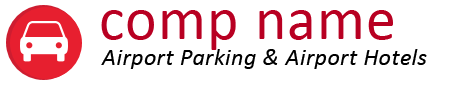
<style>
.page{position:relative;width:450px;height:86px;background:#ffffff}
.page>*{position:absolute;margin:0}
.t1{font:60px "Calibri";letter-spacing:0.02em;color:#b80022}
.t2{font:24px "Calibri-Italic";letter-spacing:0.02em;color:#000000}
</style>
<div class="page">
<p class="t1" style="left:101px;top:10px;width:292px;height:40px">comp name</p>
<p class="t2" style="left:101px;top:49px;width:326px;height:20px">Airport Parking &amp; Airport Hotels</p>
</div>
